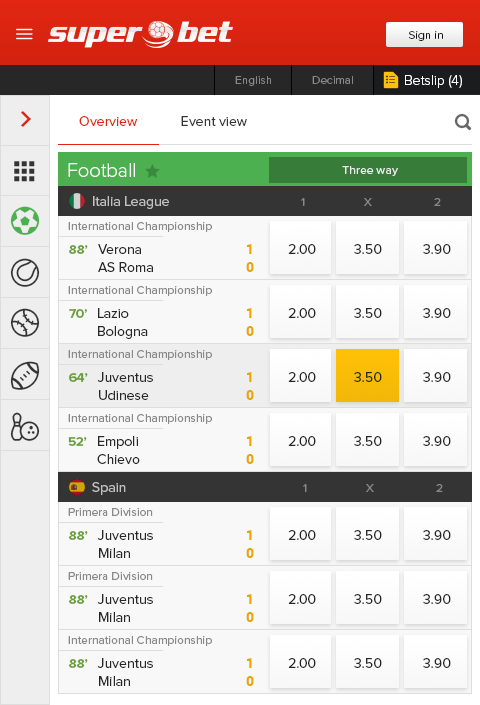
<style>
.page{position:relative;width:480px;height:705px;background:#f8f8f8}
.page>*{position:absolute;margin:0}
.t1{font:12px "ProximaNova-Light";color:#111111}
.t2{font:12px "ProximaNova-Light";color:#898989}
.t3{font:14px "ProximaNova-Light";color:#fffefe}
.t4{font:14px "ProximaNova-Regular";color:#343434}
.t5{font:14px "ProximaNova-Regular";color:#de2612}
.t6{font:20px "ProximaNova-Light";color:#fffefe}
.t7{font:12px "ProximaNova-Regular";color:#ebebeb}
.t8{font:14px "ProximaNova-Regular";color:#c2c2c2}
.t9{font:12px "ProximaNova-Regular";color:#898989}
.t10{font:13px "ProximaNova-Bold";color:#689f38}
.t11{font:14px/18px "ProximaNova-Regular";color:#272727}
.t12{font:14px/18px "Roboto-Black";color:#e9a504}
.t13{font:14px "ProximaNova-Regular";color:#272727}
</style>
<div class="page">
<p class="t1" style="left:408px;top:31px;width:35px;height:10px">Sign in</p>
<p class="t2" style="left:235px;top:76px;width:36px;height:10px">English</p>
<p class="t2" style="left:312px;top:76px;width:41px;height:8px">Decimal</p>
<p class="t3" style="left:405px;top:75px;width:57px;height:13px">Betslip (4)</p>
<p class="t4" style="left:79px;top:116px;width:168px;height:10px"><span class="t5">Overview            </span>Event view</p>
<p class="t6" style="left:68px;top:163px;width:67px;height:14px">Football</p>
<p class="t7" style="left:342px;top:166px;width:56px;height:10px">Three way</p>
<p class="t8" style="left:93px;top:196px;width:76px;height:13px">Italia League</p>
<p class="t9" style="left:301px;top:198px;width:140px;height:8px">1                   X                    2</p>
<p class="t9" style="left:68px;top:222px;width:144px;height:10px">International Championship</p>
<p class="t10" style="left:69px;top:245px;width:19px;height:9px">88’</p>
<p class="t11" style="left:98px;top:244px;width:55px;height:28px">Verona<br>AS Roma</p>
<p class="t12" style="left:246px;top:244px;width:8px;height:28px">1<br>0</p>
<p class="t13" style="left:288px;top:244px;width:28px;height:10px">2.00</p>
<p class="t13" style="left:354px;top:244px;width:28px;height:10px">3.50</p>
<p class="t13" style="left:423px;top:244px;width:28px;height:10px">3.90</p>
<p class="t9" style="left:68px;top:286px;width:144px;height:10px">International Championship</p>
<p class="t10" style="left:69px;top:309px;width:18px;height:9px">70’</p>
<p class="t11" style="left:98px;top:308px;width:50px;height:31px">Lazio<br>Bologna</p>
<p class="t12" style="left:246px;top:308px;width:8px;height:28px">1<br>0</p>
<p class="t13" style="left:288px;top:308px;width:28px;height:10px">2.00</p>
<p class="t13" style="left:354px;top:308px;width:28px;height:10px">3.50</p>
<p class="t13" style="left:423px;top:308px;width:28px;height:10px">3.90</p>
<p class="t9" style="left:68px;top:350px;width:144px;height:10px">International Championship</p>
<p class="t10" style="left:69px;top:373px;width:19px;height:9px">64’</p>
<p class="t11" style="left:97px;top:372px;width:56px;height:28px">Juventus<br>Udinese</p>
<p class="t12" style="left:246px;top:372px;width:8px;height:28px">1<br>0</p>
<p class="t13" style="left:288px;top:372px;width:28px;height:10px">2.00</p>
<p class="t13" style="left:354px;top:372px;width:28px;height:10px">3.50</p>
<p class="t13" style="left:423px;top:372px;width:28px;height:10px">3.90</p>
<p class="t9" style="left:68px;top:414px;width:144px;height:10px">International Championship</p>
<p class="t10" style="left:68px;top:437px;width:19px;height:9px">52’</p>
<p class="t11" style="left:97px;top:436px;width:43px;height:28px">Empoli<br>Chievo</p>
<p class="t12" style="left:246px;top:436px;width:8px;height:28px">1<br>0</p>
<p class="t13" style="left:288px;top:436px;width:28px;height:10px">2.00</p>
<p class="t13" style="left:354px;top:436px;width:28px;height:10px">3.50</p>
<p class="t13" style="left:423px;top:436px;width:28px;height:10px">3.90</p>
<p class="t8" style="left:92px;top:482px;width:34px;height:13px">Spain</p>
<p class="t9" style="left:303px;top:484px;width:140px;height:8px">1                   X                    2</p>
<p class="t9" style="left:68px;top:508px;width:85px;height:8px">Primera Division</p>
<p class="t10" style="left:69px;top:531px;width:19px;height:9px">88’</p>
<p class="t11" style="left:97px;top:530px;width:56px;height:28px">Juventus<br>Milan</p>
<p class="t12" style="left:246px;top:530px;width:8px;height:28px">1<br>0</p>
<p class="t13" style="left:288px;top:530px;width:28px;height:10px">2.00</p>
<p class="t13" style="left:354px;top:530px;width:28px;height:10px">3.50</p>
<p class="t13" style="left:423px;top:530px;width:28px;height:10px">3.90</p>
<p class="t9" style="left:68px;top:572px;width:85px;height:8px">Primera Division</p>
<p class="t10" style="left:69px;top:595px;width:19px;height:9px">88’</p>
<p class="t11" style="left:97px;top:594px;width:56px;height:28px">Juventus<br>Milan</p>
<p class="t12" style="left:246px;top:594px;width:8px;height:28px">1<br>0</p>
<p class="t13" style="left:288px;top:594px;width:28px;height:10px">2.00</p>
<p class="t13" style="left:354px;top:594px;width:28px;height:10px">3.50</p>
<p class="t13" style="left:423px;top:594px;width:28px;height:10px">3.90</p>
<p class="t9" style="left:68px;top:636px;width:144px;height:10px">International Championship</p>
<p class="t10" style="left:69px;top:659px;width:19px;height:9px">88’</p>
<p class="t11" style="left:97px;top:658px;width:56px;height:28px">Juventus<br>Milan</p>
<p class="t12" style="left:246px;top:658px;width:8px;height:28px">1<br>0</p>
<p class="t13" style="left:288px;top:658px;width:28px;height:10px">2.00</p>
<p class="t13" style="left:354px;top:658px;width:28px;height:10px">3.50</p>
<p class="t13" style="left:423px;top:658px;width:28px;height:10px">3.90</p>
</div>
